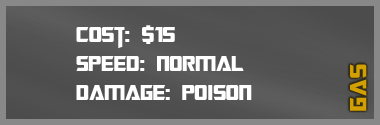
<style>
.page{position:relative;width:380px;height:125px}
.page>*{position:absolute;margin:0}
.t1{font:24px "TransformersMovie";color:#ffffff}
.t2{font:24px "TransformersMovie";letter-spacing:0.04em;color:#ffffff}
.t3{font:24px "TransformersMovie";letter-spacing:0.02em;color:#ffffff}
.t4{font:26px "TransformersMovie";letter-spacing:0.06em;color:#d49f00}
</style>
<div class="page">
<p class="t1" style="left:76px;top:25px;width:176px;height:75px">Cost: $15<br>Spee<span class="t2">d</span>: N<span class="t3">or</span>mal<br>Damage: p<span class="t3">o</span><span class="t2">i</span>son</p>
<p class="t4" style="left:350px;top:64px;width:17px;height:47px;rotate:-90deg">gas</p>
</div>
